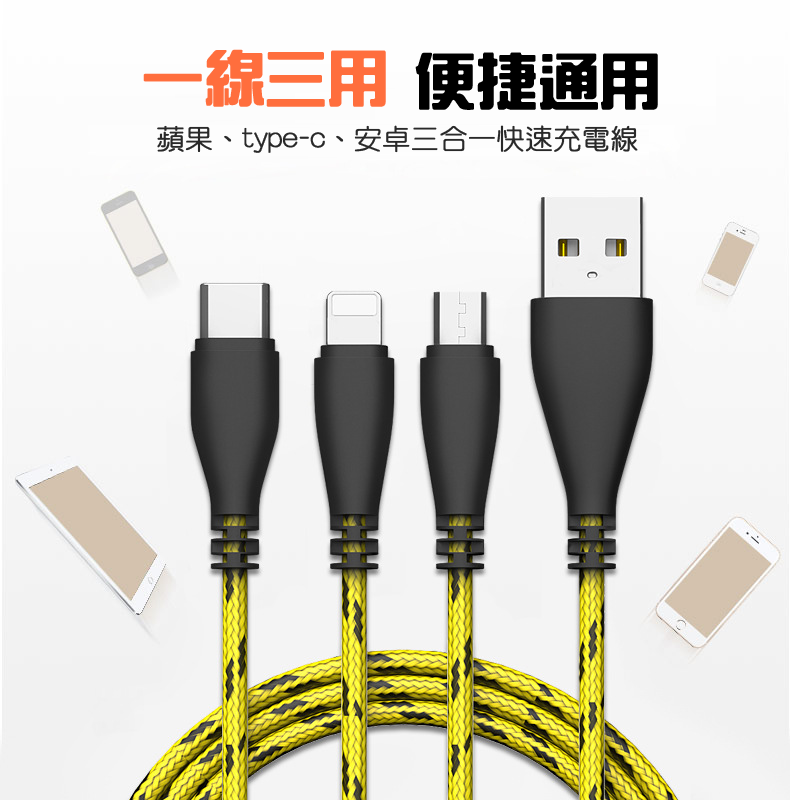
<style>
.page{position:relative;width:800px;height:800px}
.page>*{position:absolute;margin:0}
.t1{font:60px "HanWangZonYi";color:#ff6e3d;font-weight:bold}
.t2{font:60px "HanWangZonYi";color:#000000;font-weight:bold}
.t3{font:27.8px "HanWangYenLight";color:#292929;font-weight:bold}
</style>
<div class="page">
<p class="t1" style="left:143px;top:49px;width:243px;height:58px">一線三用</p>
<p class="t2" style="left:415px;top:52px;width:243px;height:58px">便捷通用</p>
<p class="t3" style="left:157px;top:125px;width:481px;height:28px">蘋果、type-c、安卓三合一快速充電線</p>
</div>
